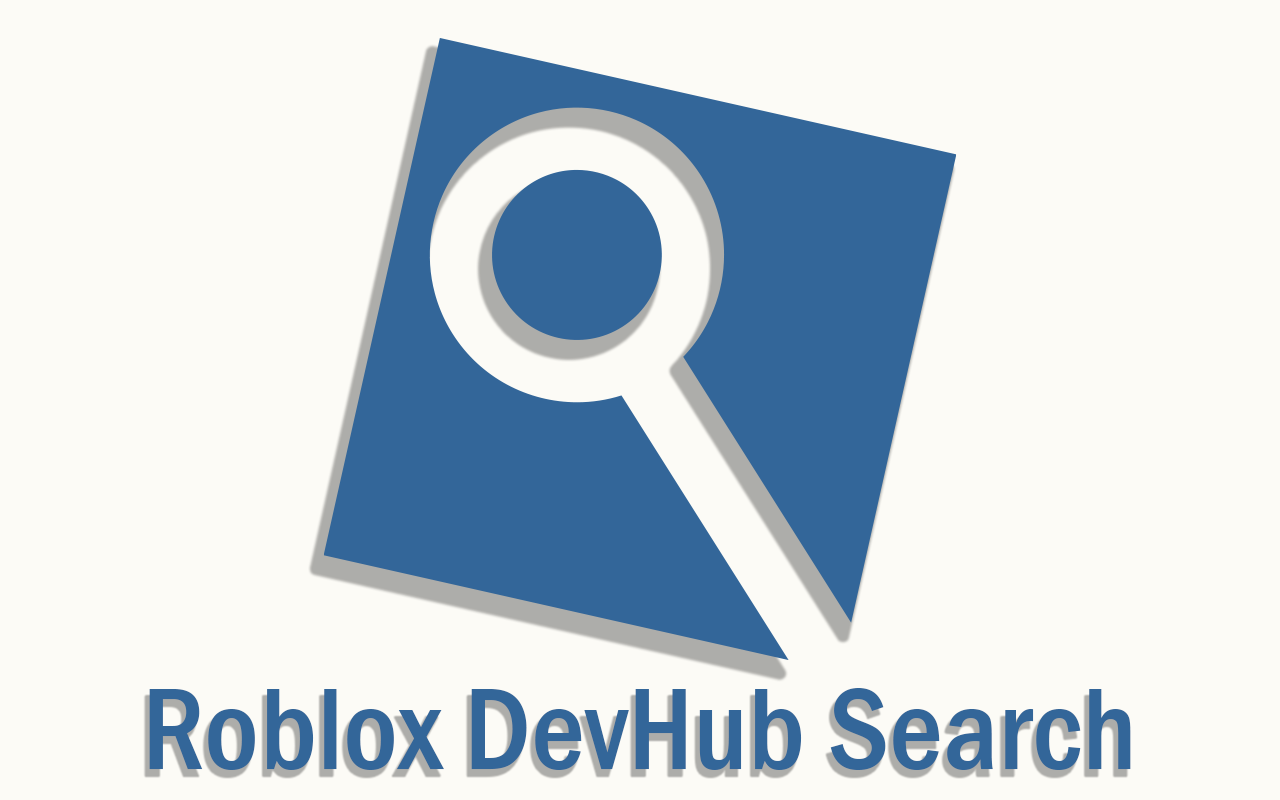
<style>
.page{position:relative;width:1280px;height:800px;background:#fcfbf6}
.page>*{position:absolute;margin:0}
.t1{font:120px "FranklinGothic-MediumCond";color:#336699}
</style>
<div class="page">
<p class="t1" style="left:149px;top:688px;width:982px;height:82px">Roblox DevHub Search</p>
</div>
